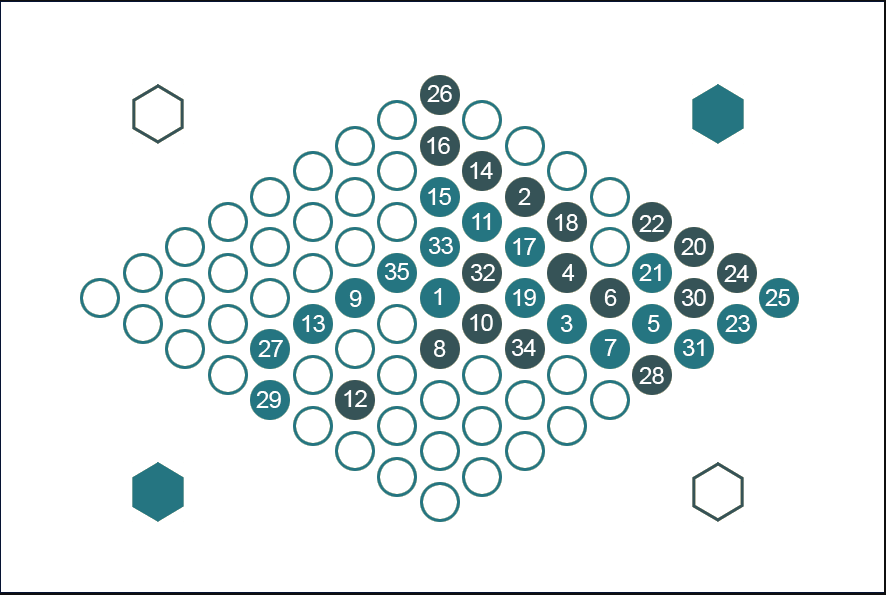
<style>
.page{position:relative;width:886px;height:595px;background:#ffffff}
.page>*{position:absolute;margin:0}
.t1{font:24px "ArialMT";letter-spacing:-0.025em;color:#ffffff}
</style>
<div class="page">
<p class="t1" style="left:427px;top:85px;width:25px;height:17px">26</p>
<p class="t1" style="left:427px;top:137px;width:23px;height:17px">16</p>
<p class="t1" style="left:470px;top:162px;width:23px;height:17px">14</p>
<p class="t1" style="left:428px;top:188px;width:23px;height:17px">15</p>
<p class="t1" style="left:518px;top:188px;width:13px;height:17px">2</p>
<p class="t1" style="left:472px;top:213px;width:19px;height:17px">11</p>
<p class="t1" style="left:555px;top:214px;width:23px;height:17px">18</p>
<p class="t1" style="left:639px;top:215px;width:25px;height:17px">22</p>
<p class="t1" style="left:429px;top:237px;width:24px;height:17px">33</p>
<p class="t1" style="left:513px;top:238px;width:23px;height:17px">17</p>
<p class="t1" style="left:681px;top:238px;width:25px;height:17px">20</p>
<p class="t1" style="left:385px;top:263px;width:24px;height:17px">35</p>
<p class="t1" style="left:471px;top:264px;width:24px;height:17px">32</p>
<p class="t1" style="left:562px;top:264px;width:13px;height:17px">4</p>
<p class="t1" style="left:639px;top:264px;width:22px;height:17px">21</p>
<p class="t1" style="left:724px;top:265px;width:25px;height:17px">24</p>
<p class="t1" style="left:349px;top:290px;width:13px;height:17px">9</p>
<p class="t1" style="left:434px;top:288px;width:8px;height:17px">1</p>
<p class="t1" style="left:513px;top:289px;width:23px;height:17px">19</p>
<p class="t1" style="left:604px;top:289px;width:13px;height:17px">6</p>
<p class="t1" style="left:682px;top:289px;width:24px;height:17px">30</p>
<p class="t1" style="left:765px;top:289px;width:25px;height:17px">25</p>
<p class="t1" style="left:302px;top:315px;width:23px;height:17px">13</p>
<p class="t1" style="left:470px;top:314px;width:23px;height:17px">10</p>
<p class="t1" style="left:561px;top:315px;width:12px;height:17px">3</p>
<p class="t1" style="left:648px;top:315px;width:12px;height:17px">5</p>
<p class="t1" style="left:725px;top:315px;width:25px;height:17px">23</p>
<p class="t1" style="left:258px;top:340px;width:25px;height:17px">27</p>
<p class="t1" style="left:434px;top:340px;width:12px;height:17px">8</p>
<p class="t1" style="left:512px;top:339px;width:24px;height:17px">34</p>
<p class="t1" style="left:604px;top:339px;width:13px;height:17px">7</p>
<p class="t1" style="left:683px;top:339px;width:21px;height:17px">31</p>
<p class="t1" style="left:639px;top:367px;width:25px;height:17px">28</p>
<p class="t1" style="left:344px;top:390px;width:23px;height:17px">12</p>
<p class="t1" style="left:256px;top:391px;width:25px;height:17px">29</p>
</div>
